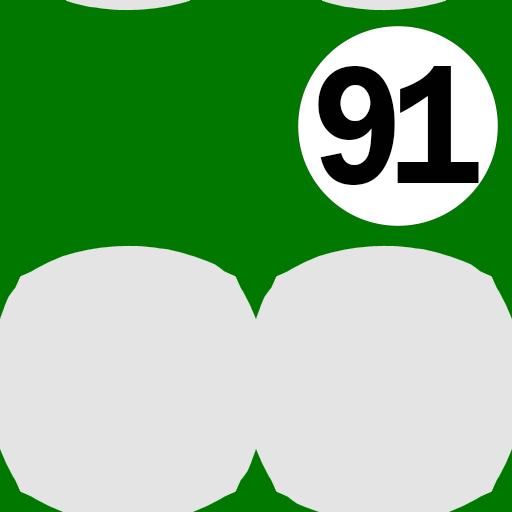
<style>
.page{position:relative;width:512px;height:512px;background:#e4e4e4}
.page>*{position:absolute;margin:0}
.t1{font:172.5px "FranklinGothic-Demi";letter-spacing:-0.05em;color:#010101;scale:0.87 1}
</style>
<div class="page">
<p class="t1" style="left:318px;top:66px;width:161px;height:119px">91</p>
</div>
